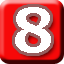
<style>
.page{position:relative;width:64px;height:64px;background:#ffffff}
.page>*{position:absolute;margin:0}
.t1{font:60px "Meiryo-Bold";color:#ffffff}
</style>
<div class="page">
<p class="t1" style="left:15px;top:7px;width:36px;height:46px">8</p>
</div>
